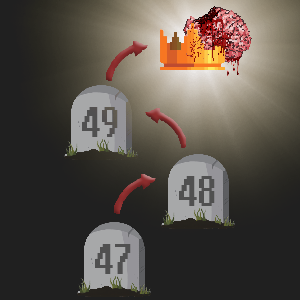
<style>
.page{position:relative;width:300px;height:300px;background:#202020}
.page>*{position:absolute;margin:0}
.t1{font:48px "RuneScape-UF";color:#505050;scale:0.84 1}
.t2{font:48px "RuneScape-UF";color:#505050;scale:0.85 1}
</style>
<div class="page">
<p class="t1" style="left:82px;top:107px;width:36px;height:30px">49</p>
<p class="t2" style="left:179px;top:176px;width:36px;height:30px">48</p>
<p class="t2" style="left:95px;top:244px;width:36px;height:30px">47</p>
</div>
